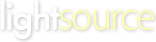
<style>
.page{position:relative;width:156px;height:42px;background:#ffffff}
.page>*{position:absolute;margin:0}
.t1{font:36px "KozGoPro-Light";letter-spacing:-0.05em;color:#fffeae}
.t2{font:36px "Station-Medium";letter-spacing:-0.05em;color:#ffffff}
</style>
<div class="page">
<p class="t1" style="left:0px;top:0px;width:154px;height:39px"><span class="t2">light</span>source</p>
</div>
